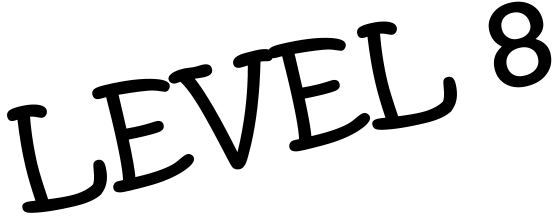
<style>
.page{position:relative;width:555px;height:222px;background:#ffffff}
.page>*{position:absolute;margin:0}
.t1{font:125px "KristenITC-Regular";color:#000000}
</style>
<div class="page">
<p class="t1" style="left:7px;top:1px;width:545px;height:212px;rotate:-13deg">LEVEL 8</p>
</div>
